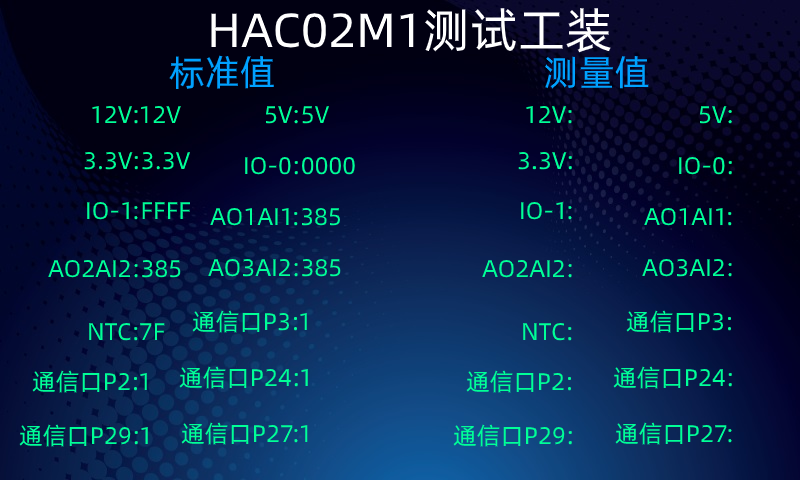
<style>
.page{position:relative;width:800px;height:480px}
.page>*{position:absolute;margin:0}
.t1{font:48px "AlibabaPuHuiTi-Regular";color:#ffffff}
.t2{font:36px "AlibabaPuHuiTi-Regular";color:#00a1ff}
.t3{font:24px "AlibabaPuHuiTi-Regular";color:#00ff97}
</style>
<div class="page">
<p class="t1" style="left:211px;top:8px;width:400px;height:45px">HAC02M1测试工装</p>
<p class="t2" style="left:169px;top:55px;width:480px;height:35px">标准值                             测量值</p>
<p class="t3" style="left:92px;top:106px;width:89px;height:18px">12V:12V</p>
<p class="t3" style="left:266px;top:106px;width:63px;height:18px">5V:5V</p>
<p class="t3" style="left:526px;top:106px;width:46px;height:18px">12V:</p>
<p class="t3" style="left:700px;top:106px;width:32px;height:18px">5V:</p>
<p class="t3" style="left:84px;top:152px;width:107px;height:18px">3.3V:3.3V</p>
<p class="t3" style="left:245px;top:157px;width:110px;height:18px">IO-0:0000</p>
<p class="t3" style="left:518px;top:152px;width:54px;height:18px">3.3V:</p>
<p class="t3" style="left:679px;top:157px;width:53px;height:18px">IO-0:</p>
<p class="t3" style="left:87px;top:202px;width:103px;height:18px">IO-1:FFFF</p>
<p class="t3" style="left:210px;top:208px;width:130px;height:18px">AO1AI1:385</p>
<p class="t3" style="left:521px;top:202px;width:51px;height:18px">IO-1:</p>
<p class="t3" style="left:644px;top:208px;width:88px;height:18px">AO1AI1:</p>
<p class="t3" style="left:48px;top:260px;width:133px;height:18px">AO2AI2:385</p>
<p class="t3" style="left:208px;top:259px;width:133px;height:18px">AO3AI2:385</p>
<p class="t3" style="left:482px;top:260px;width:90px;height:18px">AO2AI2:</p>
<p class="t3" style="left:642px;top:259px;width:90px;height:18px">AO3AI2:</p>
<p class="t3" style="left:192px;top:310px;width:115px;height:23px">通信口P3:1</p>
<p class="t3" style="left:626px;top:310px;width:106px;height:23px">通信口P3:</p>
<p class="t3" style="left:89px;top:323px;width:76px;height:18px">NTC:7F</p>
<p class="t3" style="left:523px;top:323px;width:49px;height:18px">NTC:</p>
<p class="t3" style="left:179px;top:366px;width:129px;height:23px">通信口P24:1</p>
<p class="t3" style="left:613px;top:366px;width:119px;height:23px">通信口P24:</p>
<p class="t3" style="left:32px;top:370px;width:115px;height:23px">通信口P2:1</p>
<p class="t3" style="left:466px;top:370px;width:106px;height:23px">通信口P2:</p>
<p class="t3" style="left:19px;top:424px;width:129px;height:23px">通信口P29:1</p>
<p class="t3" style="left:181px;top:422px;width:127px;height:23px">通信口P27:1</p>
<p class="t3" style="left:453px;top:424px;width:119px;height:23px">通信口P29:</p>
<p class="t3" style="left:615px;top:422px;width:117px;height:23px">通信口P27:</p>
</div>
